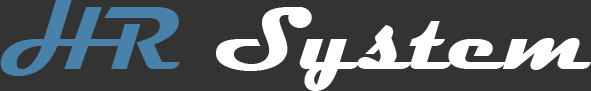
<style>
.page{position:relative;width:591px;height:91px;background:#333333}
.page>*{position:absolute;margin:0}
.t1{font:90px "Magneto-Bold";color:#ffffff}
.t2{font:90px "Magneto-Bold";color:#4881a9}
</style>
<div class="page">
<p class="t1" style="left:0px;top:0px;width:591px;height:91px"><span class="t2">HR </span>System</p>
</div>
